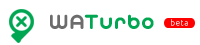
<style>
.page{position:relative;width:200px;height:45px;background:#ffffff}
.page>*{position:absolute;margin:0}
.t1{font:20.5px "TypoHoopDemo-Bold";letter-spacing:0.075em;color:#00a651}
.t2{font:20.5px "TypoHoopDemo-Bold";letter-spacing:0.075em;color:#6c6c6c}
.t3{font:8px "Ubuntu-Light";letter-spacing:0.075em}
</style>
<div class="page">
<p class="t1" style="left:50px;top:14px;width:104px;height:15px"><span class="t2">WA</span>Turbo</p>
<p class="t3" style="left:171px;top:19px;width:17px;height:7px">beta</p>
</div>
